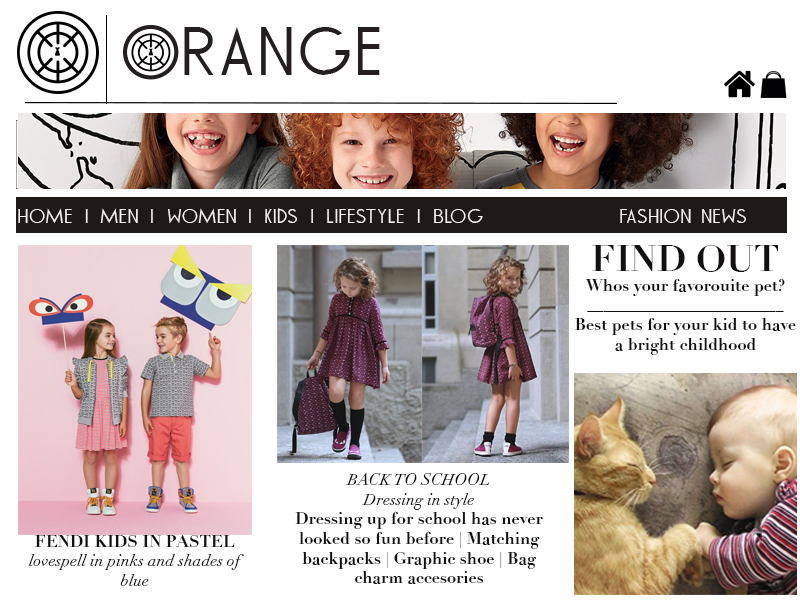
<style>
.page{position:relative;width:800px;height:600px;background:#ffffff}
.page>*{position:absolute;margin:0}
.t1{font:18px "TOMMYHILFIGERAF";color:#f5f0ea}
.t2{font:16.4px "Didot-Bold";color:#131010}
.t3{font:36px "Didot-Bold";color:#131010}
.t4{font:16.4px "Didot-Italic";color:#131010}
</style>
<div class="page">
<p class="t1" style="left:18px;top:208px;width:728px;height:15px">HOME | MEN | WOMEN | KIDS | LIfestyle | BLOG               FASHION NEWS</p>
<p class="t2" style="left:575px;top:245px;width:221px;height:110px;text-align:center"><span class="t3">FIND OUT<br></span>Whos your favorouite pet? <br>________________________<br>Best pets for your kid to have a bright childhood</p>
<p class="t2" style="left:295px;top:473px;width:248px;height:111px;text-align:center"><span class="t4">BACK TO SCHOOL <br>Dressing in style <br></span>Dressing up for school has never looked so fun before | Matching backpacks | Graphic shoe | Bag charm accesories</p>
<p class="t4" style="left:29px;top:535px;width:215px;height:51px;text-align:center"><span class="t2">FENDI KIDS IN PASTEL <br></span>lovespell in pinks and shades of blue</p>
</div>
